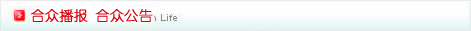
<style>
.page{position:relative;width:471px;height:31px}
.page>*{position:absolute;margin:0}
.t1{font:14px "YouYuan";color:#d7000f;font-weight:bold}
</style>
<div class="page">
<p class="t1" style="left:30px;top:9px;width:123px;height:14px">合众播报 合众公告</p>
</div>
